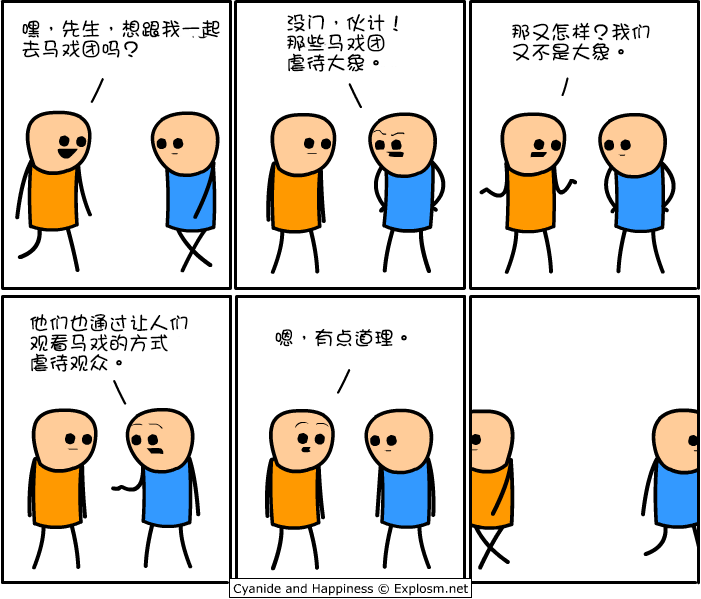
<style>
.page{position:relative;width:701px;height:599px;background:#ffffff}
.page>*{position:absolute;margin:0}
.t1{font:20px/20px "DFGirl";color:#000000}
.t2{font:20px "DFGirl";color:#000000}
</style>
<div class="page">
<p class="t1" style="left:287px;top:14px;width:111px;height:58px">没门，伙计！<br>那些马戏团<br>虐待大象。</p>
<p class="t1" style="left:22px;top:19px;width:198px;height:39px">嘿，先生，想跟我一起<br>去马戏团吗？</p>
<p class="t1" style="left:512px;top:22px;width:138px;height:39px">那又怎样？我们<br>又不是大象。</p>
<p class="t1" style="left:30px;top:314px;width:158px;height:58px">他们也通过让人们<br>观看马戏的方式<br>虐待观众。</p>
<p class="t2" style="left:275px;top:328px;width:132px;height:19px">嗯，有点道理。</p>
</div>
